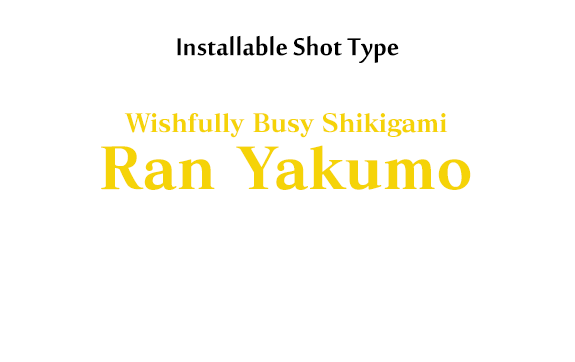
<style>
.page{position:relative;width:575px;height:362px;background:#ffffff}
.page>*{position:absolute;margin:0}
.t1{font:38px "MoolBoran";color:#000000}
.t2{font:25px "MatissePro-EB";letter-spacing:-0.019em;color:#f5d308}
.t3{font:57px "MatissePro-EB";color:#f5d308}
</style>
<div class="page">
<p class="t1" style="left:177px;top:35px;width:222px;height:28px">Installable Shot Type</p>
<p class="t2" style="left:124px;top:113px;width:324px;height:25px">Wishfully Busy Shikigami</p>
<p class="t3" style="left:101px;top:145px;width:370px;height:45px">Ran Yakumo</p>
</div>
